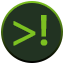
<style>
.page{position:relative;width:64px;height:64px;background:#223322}
.page>*{position:absolute;margin:0}
.t1{font:44.4px "MyriadPro-Regular";color:#7cc121;font-weight:bold}
</style>
<div class="page">
<p class="t1" style="left:13px;top:15px;width:35px;height:31px">&gt;!</p>
</div>
